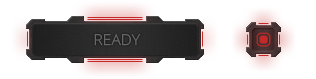
<style>
.page{position:relative;width:316px;height:79px;background:#ffffff}
.page>*{position:absolute;margin:0}
.t1{font:15px "OpenSans-Light";scale:1.04 1}
</style>
<div class="page">
<p class="t1" style="left:94px;top:34px;width:46px;height:12px">READY</p>
</div>
